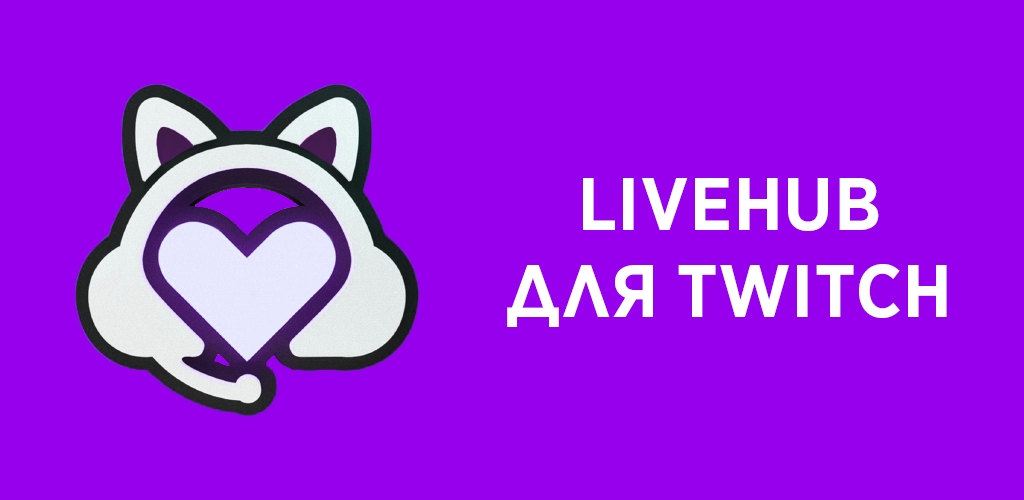
<style>
.page{position:relative;width:1024px;height:500px;background:#9700ed}
.page>*{position:absolute;margin:0}
.t1{font:72px "GothamNarrSSm-Bold";color:#ffffff;text-transform:uppercase}
</style>
<div class="page">
<p class="t1" style="left:507px;top:178px;width:440px;height:149px;text-align:center">LiveHub<br>для Twitch</p>
</div>
